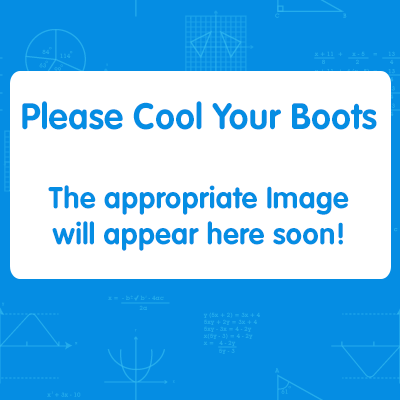
<style>
.page{position:relative;width:400px;height:400px;background:#058de3}
.page>*{position:absolute;margin:0}
.t1{font:30px "NGFLRounded-Bold";color:#058de3}
.t2{font:36px "NGFLRounded-Bold";color:#058de3}
</style>
<div class="page">
<p class="t1" style="left:22px;top:101px;width:355px;height:150px;text-align:center"><span class="t2">Please Cool Your Boots<br><br></span>The appropriate Image<br>will appear here soon!</p>
</div>
